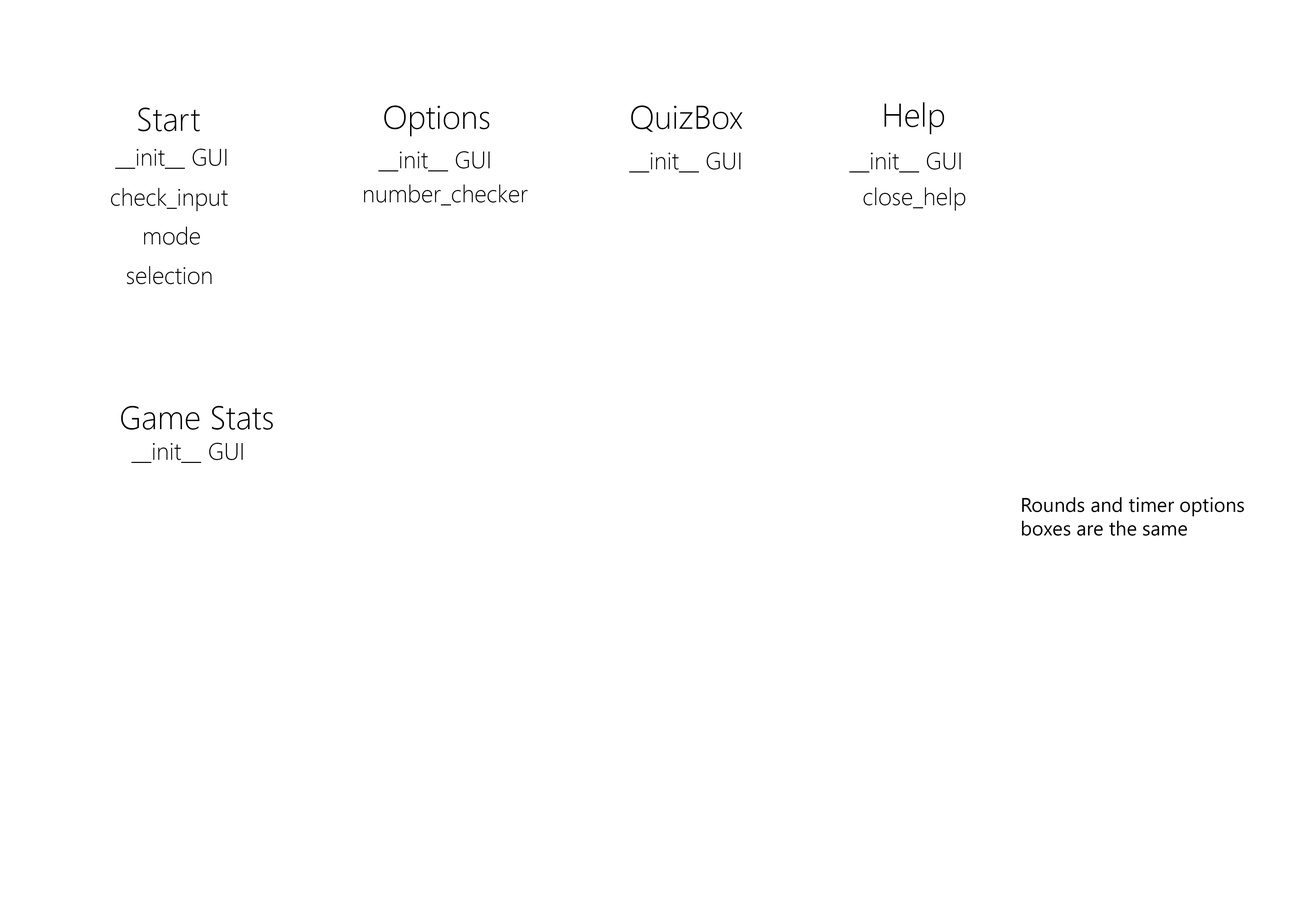
<style>
.page{position:relative;width:1299px;height:918px;background:#ffffff}
.page>*{position:absolute;margin:0}
.t1{font:32.7px "SegoeUI-Light";color:#000000}
.t2{font:24px "SegoeUI-Light";color:#000000}
.t3{font:19.6px "SegoeUI";color:#000000}
</style>
<div class="page">
<p class="t1" style="left:138px;top:108px;width:62px;height:23px">Start</p>
<p class="t1" style="left:384px;top:105px;width:105px;height:31px">Options</p>
<p class="t1" style="left:631px;top:105px;width:111px;height:27px">QuizBox</p>
<p class="t1" style="left:884px;top:102px;width:60px;height:32px">Help</p>
<p class="t2" style="left:115px;top:149px;width:111px;height:20px">__init__ GUI</p>
<p class="t2" style="left:378px;top:151px;width:111px;height:20px">__init__ GUI</p>
<p class="t2" style="left:629px;top:152px;width:111px;height:20px">__init__ GUI</p>
<p class="t2" style="left:849px;top:152px;width:111px;height:20px">__init__ GUI</p>
<p class="t2" style="left:364px;top:185px;width:163px;height:20px">number_checker</p>
<p class="t2" style="left:111px;top:188px;width:117px;height:23px">check_input</p>
<p class="t2" style="left:863px;top:187px;width:102px;height:24px">close_help</p>
<p class="t2" style="left:144px;top:227px;width:56px;height:18px">mode</p>
<p class="t2" style="left:127px;top:266px;width:85px;height:18px">selection</p>
<p class="t1" style="left:121px;top:406px;width:152px;height:24px">Game Stats</p>
<p class="t2" style="left:131px;top:443px;width:112px;height:20px">__init__ GUI</p>
<p class="t3" style="left:1022px;top:497px;width:222px;height:39px">Rounds and timer options <br>boxes are the same</p>
</div>
